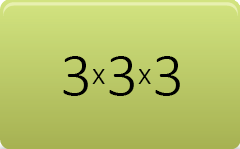
<style>
.page{position:relative;width:240px;height:149px}
.page>*{position:absolute;margin:0}
.t1{font:64px "Calibri-Light";color:#000000}
.t2{font:32px "Calibri-Light";color:#000000}
</style>
<div class="page">
<p class="t1" style="left:63px;top:56px;width:117px;height:40px">3<span class="t2">x</span>3<span class="t2">x</span>3</p>
</div>
